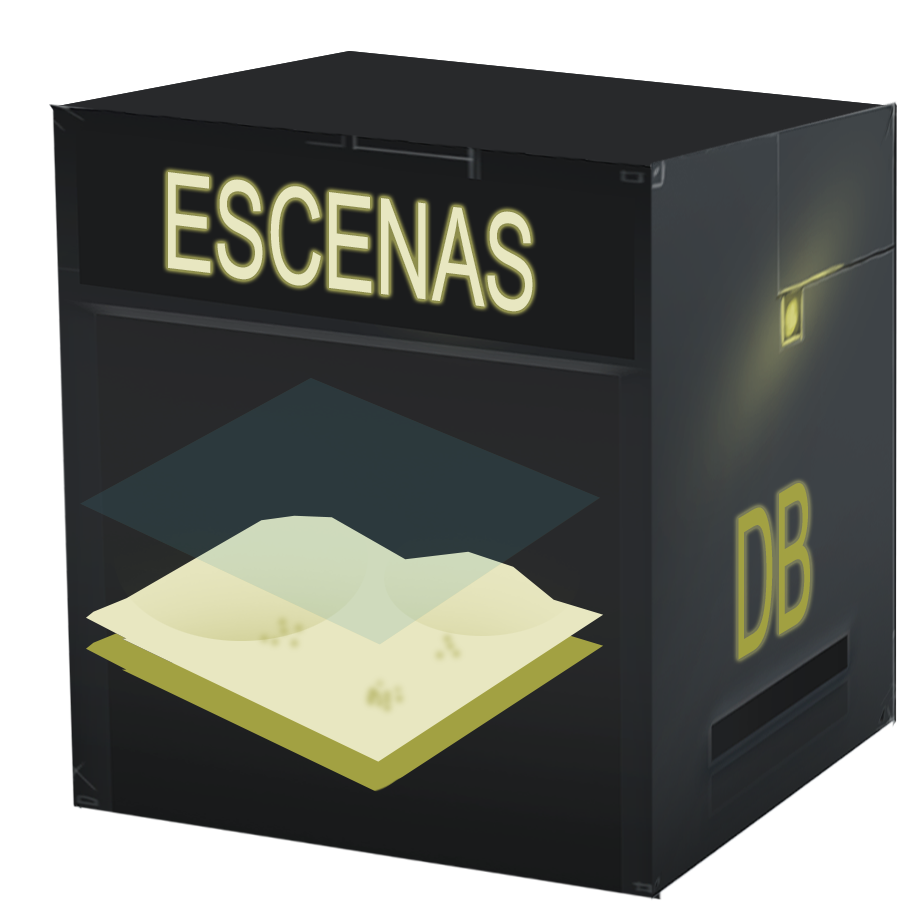
<style>
.page{position:relative;width:916px;height:916px;background:#ffffff}
.page>*{position:absolute;margin:0}
.t1{font:133.5px "ArialUnicodeMS";color:#e8e7c1;scale:0.59 1}
.t2{font:196.6px "ArialUnicodeMS";color:#a2a142;scale:0.34 1}
</style>
<div class="page">
<p class="t1" style="left:168px;top:172px;width:365px;height:140px;rotate:7deg">ESCENAS</p>
<p class="t2" style="left:738px;top:483px;width:72px;height:177px;rotate:-31deg">DB</p>
</div>
